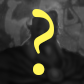
<style>
.page{position:relative;width:84px;height:84px}
.page>*{position:absolute;margin:0}
.t1{font:101px "AGaramondPro-Regular";color:#fff559}
</style>
<div class="page">
<p class="t1" style="left:32px;top:9px;width:22px;height:66px">?</p>
</div>
